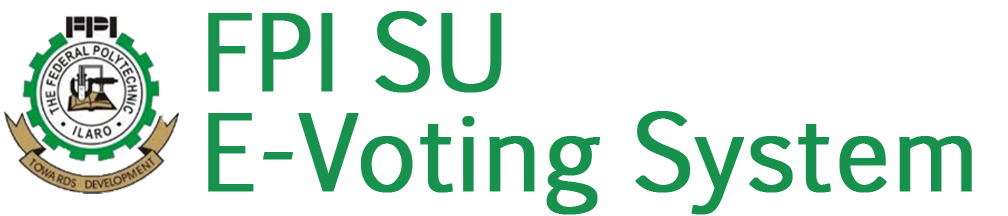
<style>
.page{position:relative;width:1008px;height:216px;background:#ffffff}
.page>*{position:absolute;margin:0}
.t1{font:100px/100px "EuphemiaCAS";color:#19924f;font-weight:bold}
</style>
<div class="page">
<p class="t1" style="left:208px;top:11px;width:764px;height:204px">FPI SU<br>E-Voting System</p>
</div>
